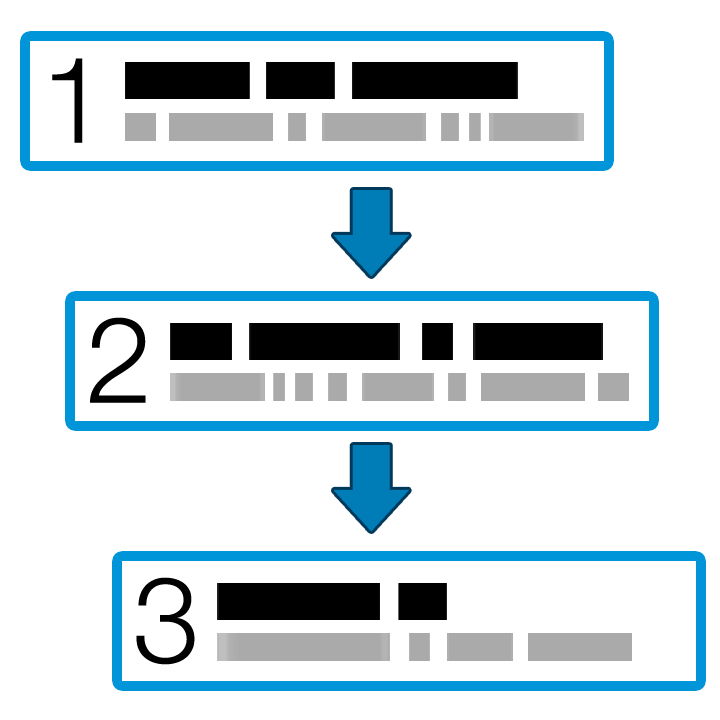
<style>
.page{position:relative;width:720px;height:720px;background:#ffffff}
.page>*{position:absolute;margin:0}
.t1{font:120px "HelveticaNeue-Light";color:#000000}
</style>
<div class="page">
<p class="t1" style="left:52px;top:58px;width:31px;height:85px">1</p>
<p class="t1" style="left:90px;top:317px;width:56px;height:86px">2</p>
<p class="t1" style="left:136px;top:577px;width:59px;height:88px">3</p>
</div>
